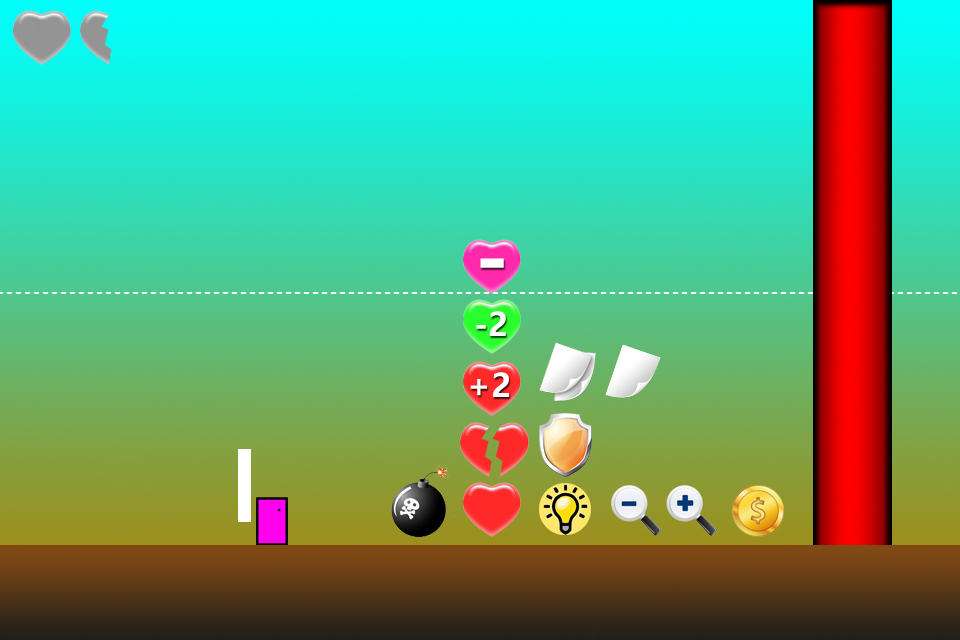
<style>
.page{position:relative;width:960px;height:640px}
.page>*{position:absolute;margin:0}
.t1{font:80px "MicrosoftYaHei-Bold";color:#ffffff}
.t2{font:32px "MicrosoftYaHei-Bold";color:#ffffff}
</style>
<div class="page">
<p class="t1" style="left:480px;top:258px;width:24px;height:10px">-</p>
<p class="t2" style="left:476px;top:311px;width:30px;height:25px">-2</p>
<p class="t2" style="left:470px;top:372px;width:39px;height:25px">+2</p>
</div>
